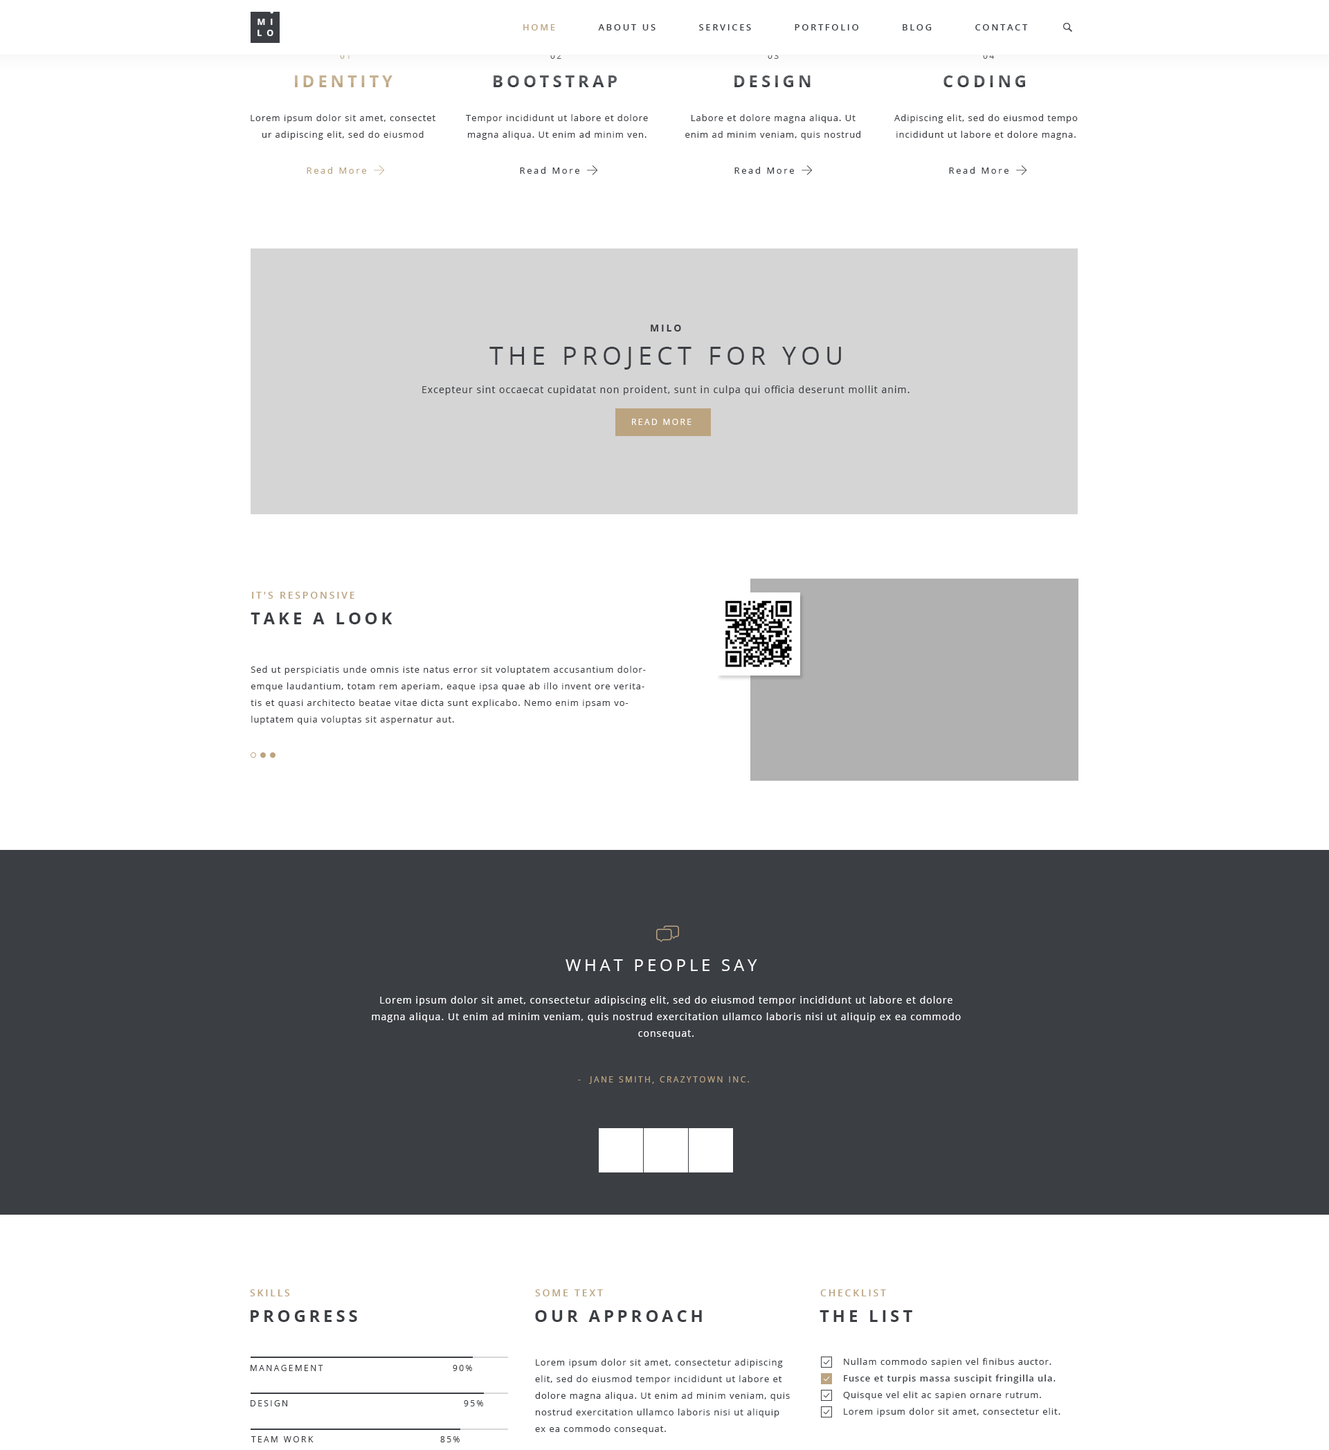
<style>
.page{position:relative;width:1329px;height:1450px;background:#ffffff}
.page>*{position:absolute;margin:0}
.t1{font:8.7px "OpenSans-Bold";letter-spacing:0.55em;color:#ffffff;text-transform:uppercase}
.t2{font:9px "OpenSans-Semibold";letter-spacing:0.2em;color:#3b3e43;text-transform:uppercase}
.t3{font:9px "OpenSans-Semibold";letter-spacing:0.2em;color:#bca480;text-transform:uppercase}
.t4{font:8.3px "OpenSans";letter-spacing:0.2em;text-transform:uppercase}
.t5{font:8.3px "OpenSans";letter-spacing:0.2em;color:#535559;text-transform:uppercase}
.t6{font:16.6px "OpenSans-Bold";letter-spacing:0.2em;color:#bca480;text-transform:uppercase}
.t7{font:16.6px "OpenSans-Bold";letter-spacing:0.2em;text-transform:uppercase}
.t8{font:9px/16.6px "OpenSans";letter-spacing:0.075em;color:#3b3e43}
.t9{font:9px "OpenSans";letter-spacing:0.2em;color:#bca480}
.t10{font:9px "OpenSans";letter-spacing:0.2em;color:#3b3e43}
.t11{font:9.7px "OpenSans-Bold";letter-spacing:0.2em;color:#3b3e43;text-transform:uppercase}
.t12{font:24.9px "OpenSans";letter-spacing:0.2em;color:#3b3e43;text-transform:uppercase}
.t13{font:9.7px "OpenSans";letter-spacing:0.075em;color:#3b3e43}
.t14{font:8.3px "OpenSans";letter-spacing:0.2em;color:#ffffff;text-transform:uppercase}
.t15{font:9.7px "OpenSans-Semibold";letter-spacing:0.2em;color:#bca480;text-transform:uppercase}
.t16{font:16.6px "OpenSans-Bold";letter-spacing:0.2em;color:#3b3e43;text-transform:uppercase}
.t17{font:16.6px "OpenSans";letter-spacing:0.2em;color:#ffffff;text-transform:uppercase}
.t18{font:9.7px/16.6px "OpenSans";letter-spacing:0.075em;color:#ffffff}
.t19{font:8.3px "OpenSans";letter-spacing:0.2em;color:#bca480;text-transform:uppercase}
.t20{font:9px/16.6px "OpenSans-Semibold";letter-spacing:0.075em;color:#3b3e43}
.t21{font:8.3px "OpenSans";letter-spacing:0.2em;color:#3b3e43;text-transform:uppercase}
.t22{font:8.3px "OpenSans";letter-spacing:0.2em;color:#3b3e43}
</style>
<div class="page">
<p class="t1" style="left:258px;top:18px;width:15px;height:8px">mi</p>
<p class="t1" style="left:258px;top:29px;width:15px;height:8px">lo</p>
<p class="t2" style="left:523px;top:24px;width:505px;height:6px"><span class="t3">Home          </span>About Us          Services          Portfolio          Blog          Contact</p>
<p class="t4" style="left:340px;top:53px;width:10px;height:6px">01</p>
<p class="t4" style="left:550px;top:53px;width:11px;height:6px">02</p>
<p class="t4" style="left:768px;top:53px;width:11px;height:6px">03</p>
<p class="t5" style="left:983px;top:53px;width:11px;height:6px">04</p>
<p class="t6" style="left:295px;top:75px;width:98px;height:12px">Identity</p>
<p class="t7" style="left:494px;top:75px;width:123px;height:12px">Bootstrap</p>
<p class="t7" style="left:735px;top:75px;width:76px;height:12px">Design</p>
<p class="t7" style="left:944px;top:75px;width:81px;height:12px">Coding</p>
<p class="t8" style="left:251px;top:114px;width:184px;height:26px;text-align:center">Lorem ipsum dolor sit amet, consectet ur adipiscing elit, sed do eiusmod</p>
<p class="t8" style="left:466px;top:114px;width:182px;height:26px;text-align:center">Tempor incididunt ut labore et dolore magna aliqua. Ut enim ad minim ven.</p>
<p class="t8" style="left:685px;top:114px;width:176px;height:26px;text-align:center">Labore et dolore magna aliqua. Ut enim ad minim veniam, quis nostrud</p>
<p class="t8" style="left:894px;top:114px;width:184px;height:26px;text-align:center">Adipiscing elit, sed do eiusmod tempo incididunt ut labore et dolore magna.</p>
<p class="t9" style="left:307px;top:167px;width:59px;height:7px">Read More</p>
<p class="t10" style="left:520px;top:167px;width:59px;height:7px">Read More</p>
<p class="t10" style="left:735px;top:167px;width:59px;height:7px">Read More</p>
<p class="t10" style="left:949px;top:167px;width:60px;height:7px">Read More</p>
<p class="t11" style="left:651px;top:325px;width:30px;height:7px">milo</p>
<p class="t12" style="left:489px;top:347px;width:352px;height:23px">The Project for you</p>
<p class="t13" style="left:422px;top:386px;width:488px;height:9px">Excepteur sint occaecat cupidatat non proident, sunt in culpa qui officia deserunt mollit anim.</p>
<p class="t14" style="left:632px;top:419px;width:60px;height:6px">Read more</p>
<p class="t15" style="left:252px;top:592px;width:102px;height:7px">it's responsive</p>
<p class="t16" style="left:251px;top:613px;width:142px;height:11px">Take a look</p>
<p class="t8" style="left:251px;top:666px;width:395px;height:59px">Sed ut perspiciatis unde omnis iste natus error sit voluptatem accusantium doloremque laudantium, totam rem aperiam, eaque ipsa quae ab illo invent ore veritatis et quasi architecto beatae vitae dicta sunt explicabo. Nemo enim ipsam voluptatem quia voluptas sit aspernatur aut.</p>
<p class="t17" style="left:566px;top:960px;width:191px;height:11px">What people say</p>
<p class="t18" style="left:372px;top:996px;width:589px;height:43px;text-align:center">Lorem ipsum dolor sit amet, consectetur adipiscing elit, sed do eiusmod tempor incididunt ut labore et dolore magna aliqua. Ut enim ad minim veniam, quis nostrud exercitation ullamco laboris nisi ut aliquip ex ea commodo consequat.</p>
<p class="t19" style="left:578px;top:1077px;width:171px;height:7px">-  jane smith, crazytown inc.</p>
<p class="t15" style="left:250px;top:1290px;width:40px;height:7px">skills</p>
<p class="t15" style="left:535px;top:1290px;width:68px;height:7px">some text</p>
<p class="t15" style="left:820px;top:1290px;width:66px;height:7px">checklist</p>
<p class="t16" style="left:251px;top:1311px;width:106px;height:11px">progress</p>
<p class="t16" style="left:535px;top:1311px;width:167px;height:11px">our approach</p>
<p class="t16" style="left:820px;top:1311px;width:92px;height:11px">the list</p>
<p class="t8" style="left:535px;top:1359px;width:255px;height:75px">Lorem ipsum dolor sit amet, consectetur adipiscing elit, sed do eiusmod tempor incididunt ut labore et dolore magna aliqua. Ut enim ad minim veniam, quis nostrud exercitation ullamco laboris nisi ut aliquip ex ea commodo consequat.</p>
<p class="t8" style="left:843px;top:1358px;width:218px;height:59px">Nullam commodo sapien vel finibus auctor.<br><span class="t20">Fusce et turpis massa suscipit fringilla ula.<br></span>Quisque vel elit ac sapien ornare rutrum.<br>Lorem ipsum dolor sit amet, consectetur elit.</p>
<p class="t21" style="left:251px;top:1365px;width:72px;height:6px">Management</p>
<p class="t22" style="left:453px;top:1365px;width:19px;height:6px">90%</p>
<p class="t21" style="left:251px;top:1401px;width:36px;height:6px">design</p>
<p class="t22" style="left:464px;top:1401px;width:19px;height:6px">95%</p>
<p class="t21" style="left:251px;top:1437px;width:63px;height:6px">team work</p>
<p class="t22" style="left:440px;top:1437px;width:20px;height:6px">85%</p>
</div>
